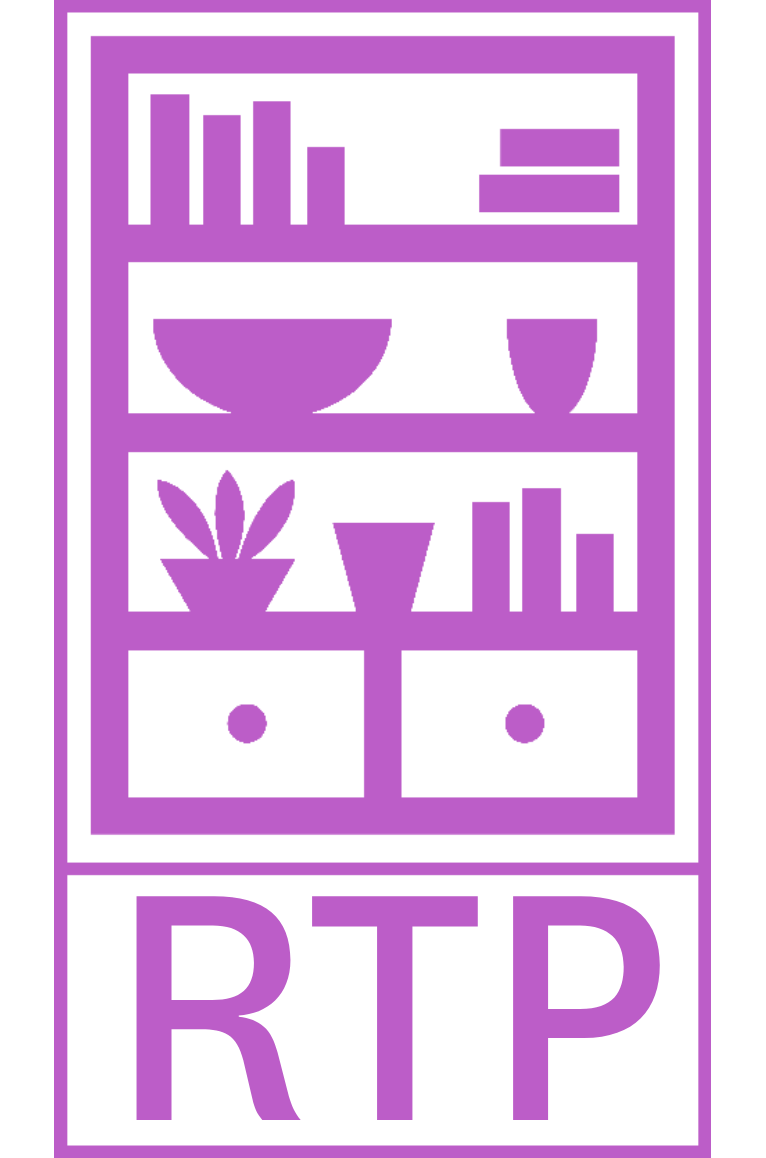
<style>
.page{position:relative;width:766px;height:1158px;background:#ffffff}
.page>*{position:absolute;margin:0}
.t1{font:380px "National-Regular";color:#bc5dc8}
</style>
<div class="page">
<p class="t1" style="left:136px;top:896px;width:524px;height:224px">RTP</p>
</div>
